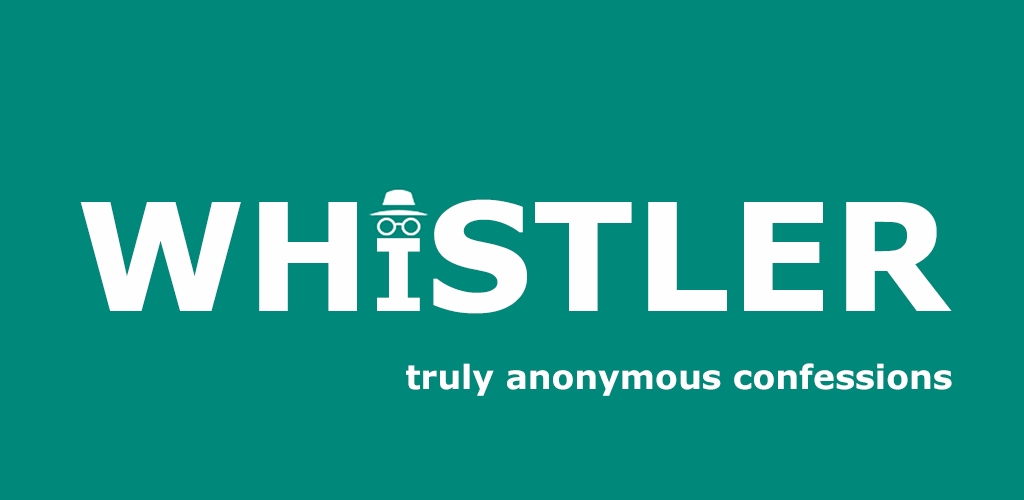
<style>
.page{position:relative;width:1024px;height:500px;background:#00897b}
.page>*{position:absolute;margin:0}
.t1{font:150px "Verdana-Bold";color:#fdfefd}
.t2{font:100px "Verdana-Bold";color:#fdfefd}
.t3{font:33.3px "Verdana-Bold";color:#fdfefd}
</style>
<div class="page">
<p class="t1" style="left:80px;top:199px;width:872px;height:115px">WH<span class="t2">I</span>STLER</p>
<p class="t3" style="left:406px;top:363px;width:546px;height:33px">truly anonymous confessions</p>
</div>
